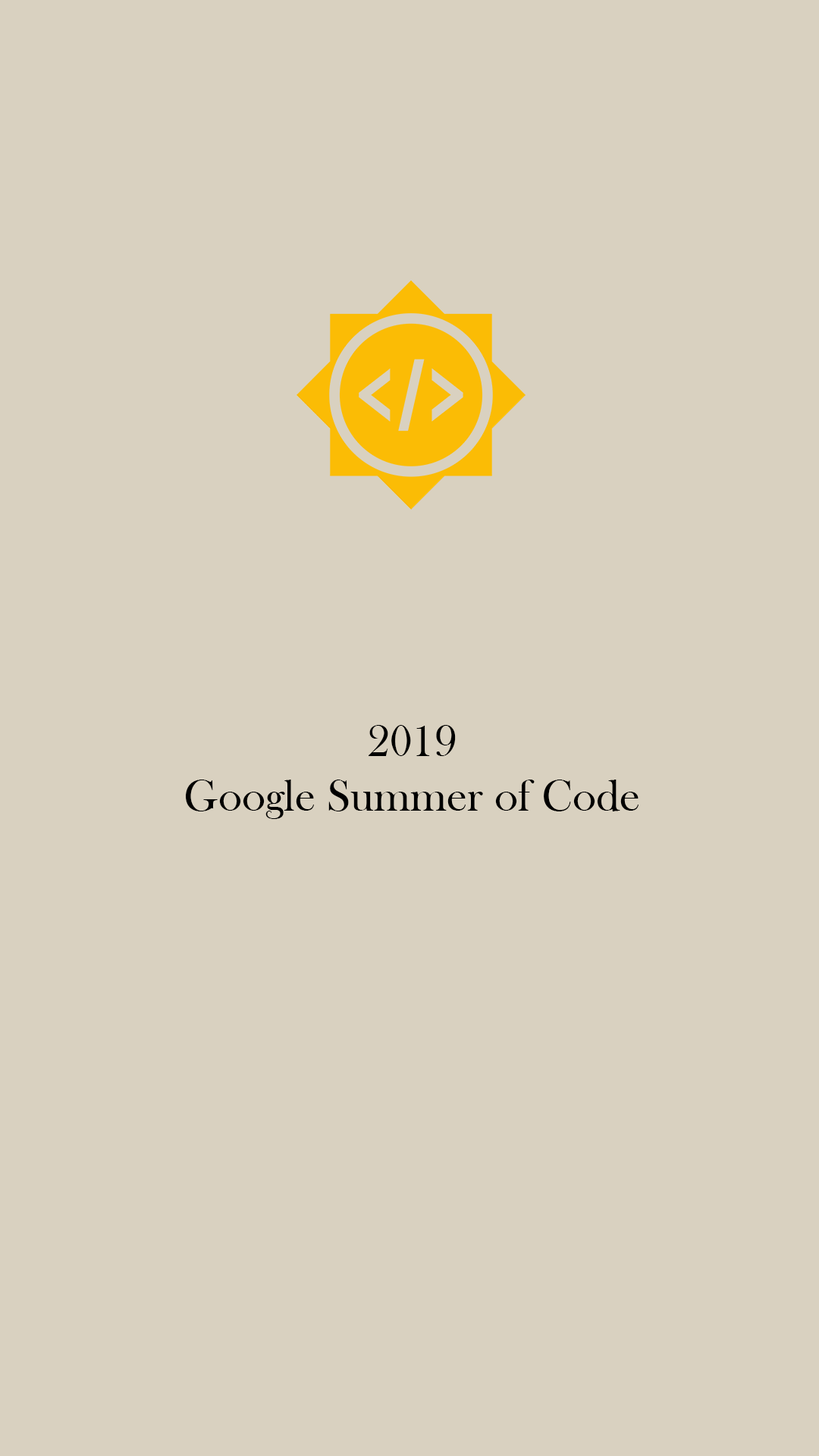
<style>
.page{position:relative;width:819px;height:1456px;background:#d9d1c0}
.page>*{position:absolute;margin:0}
.t1{font:45.5px/54.6px "BaskOldFace";color:#000000}
</style>
<div class="page">
<p class="t1" style="left:186px;top:725px;width:453px;height:94px;text-align:center">2019 <br>Google Summer of Code</p>
</div>
